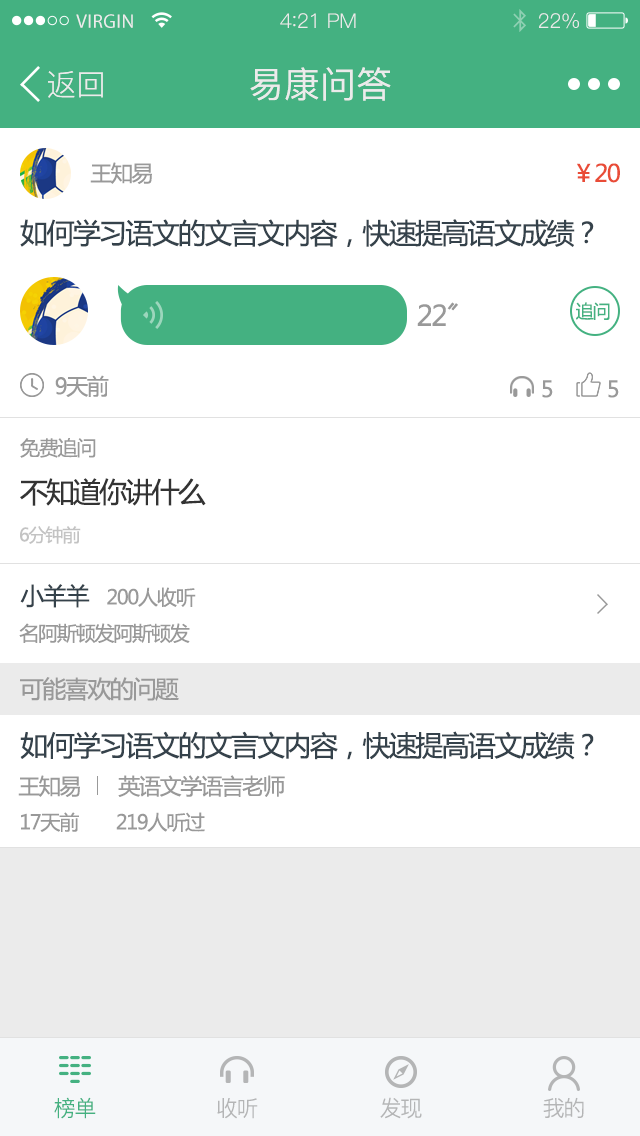
<style>
.page{position:relative;width:640px;height:1136px;background:#ffffff}
.page>*{position:absolute;margin:0}
.t1{font:19.6px "MyriadPro-Regular";letter-spacing:0.02em;color:#ebebeb}
.t2{font:20.4px "PingFang-SC-Regular";letter-spacing:-0.02em;color:#ebebeb}
.t3{font:22.1px "PingFang-SC-Regular";letter-spacing:-0.02em;color:#ebebeb}
.t4{font:30px "PingFang-SC-Regular";color:#ebebeb}
.t5{font:36px "PingFang-SC-Medium";color:#ebebeb}
.t6{font:22px "MicrosoftYaHei";letter-spacing:-0.06em;color:#999999}
.t7{font:24px "MicrosoftYaHei";letter-spacing:-0.06em;color:#e94c37}
.t8{font:28px "MicrosoftYaHei";letter-spacing:-0.06em;color:#35424b}
.t9{font:28px "MicrosoftYaHei";letter-spacing:-0.06em;color:#999999}
.t10{font:18px "MicrosoftYaHei";letter-spacing:-0.06em;color:#44b181}
.t11{font:20px "MicrosoftYaHei";letter-spacing:-0.06em;color:#999999}
.t12{font:28px "MicrosoftYaHei";letter-spacing:-0.06em;color:#333333}
.t13{font:18px "MicrosoftYaHei";letter-spacing:-0.06em;color:#c3c3c3}
.t14{font:24px "MicrosoftYaHei";letter-spacing:-0.06em;color:#35424b}
.t15{font:24px "MicrosoftYaHei";letter-spacing:-0.06em;color:#999999}
.t16{font:22px "PingFang-SC-Regular";letter-spacing:-0.06em;color:#44b181}
.t17{font:22px "PingFang-SC-Regular";letter-spacing:-0.06em;color:#b4b5b6}
</style>
<div class="page">
<p class="t1" style="left:76px;top:14px;width:57px;height:14px">VIRGIN</p>
<p class="t2" style="left:280px;top:13px;width:76px;height:15px">4<span class="t3">:</span>21 PM</p>
<p class="t2" style="left:539px;top:13px;width:40px;height:16px">22%</p>
<p class="t4" style="left:48px;top:71px;width:55px;height:27px">返回</p>
<p class="t5" style="left:250px;top:67px;width:141px;height:34px">易康问答</p>
<p class="t6" style="left:90px;top:162px;width:62px;height:22px">王知易</p>
<p class="t7" style="left:577px;top:163px;width:43px;height:20px">￥20</p>
<p class="t8" style="left:20px;top:219px;width:574px;height:28px">如何学习语文的文言文内容，快速提高语文成绩？</p>
<p class="t9" style="left:417px;top:302px;width:41px;height:24px">22〞</p>
<p class="t10" style="left:576px;top:302px;width:34px;height:18px">追问</p>
<p class="t6" style="left:55px;top:375px;width:54px;height:22px">9天前</p>
<p class="t6" style="left:542px;top:380px;width:11px;height:18px">5</p>
<p class="t6" style="left:608px;top:380px;width:11px;height:18px">5</p>
<p class="t11" style="left:20px;top:438px;width:76px;height:20px">免费追问</p>
<p class="t12" style="left:20px;top:478px;width:186px;height:28px">不知道你讲什么</p>
<p class="t13" style="left:20px;top:526px;width:61px;height:18px">6分钟前</p>
<p class="t14" style="left:20px;top:584px;width:70px;height:24px">小羊羊</p>
<p class="t11" style="left:107px;top:587px;width:89px;height:20px">200人收听</p>
<p class="t11" style="left:19px;top:623px;width:171px;height:20px">名阿斯顿发阿斯顿发</p>
<p class="t15" style="left:20px;top:677px;width:159px;height:24px">可能喜欢的问题</p>
<p class="t8" style="left:20px;top:731px;width:574px;height:29px">如何学习语文的文言文内容，快速提高语文成绩？</p>
<p class="t6" style="left:18px;top:775px;width:62px;height:22px">王知易</p>
<p class="t6" style="left:118px;top:775px;width:167px;height:22px">英语文学语言老师</p>
<p class="t11" style="left:21px;top:812px;width:184px;height:20px">17天前        219人听过</p>
<p class="t16" style="left:54px;top:1097px;width:42px;height:22px">榜单</p>
<p class="t17" style="left:380px;top:1097px;width:42px;height:22px">发现</p>
<p class="t17" style="left:543px;top:1097px;width:41px;height:21px">我的</p>
<p class="t17" style="left:217px;top:1098px;width:41px;height:21px">收听</p>
</div>
